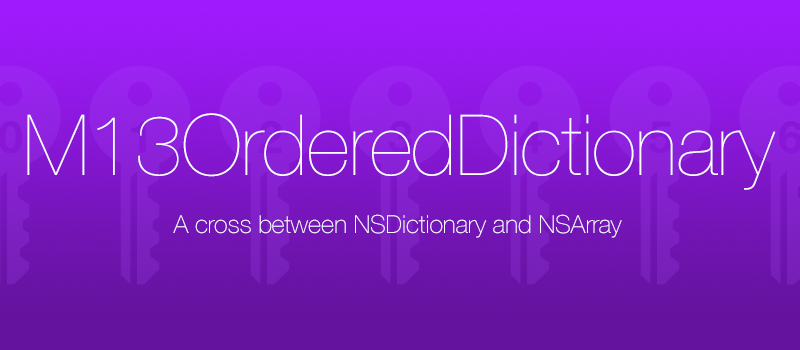
<style>
.page{position:relative;width:800px;height:350px}
.page>*{position:absolute;margin:0}
.t1{font:84.3px "HelveticaNeue-UltraLight";letter-spacing:-0.007em;color:#ffffff}
.t2{font:45.1px "HelveticaNeue-Bold";letter-spacing:-0.007em;color:#8817d8}
.t3{font:25px "HelveticaNeue-Thin";letter-spacing:-0.007em;color:#ffffff}
</style>
<div class="page">
<p class="t1" style="left:27px;top:113px;width:749px;height:77px">M13OrderedDictionary</p>
<p class="t2" style="left:0px;top:121px;width:22px;height:33px">0</p>
<p class="t2" style="left:518px;top:121px;width:25px;height:32px">4</p>
<p class="t3" style="left:173px;top:214px;width:449px;height:24px">A cross between NSDictionary and NSArray</p>
</div>
